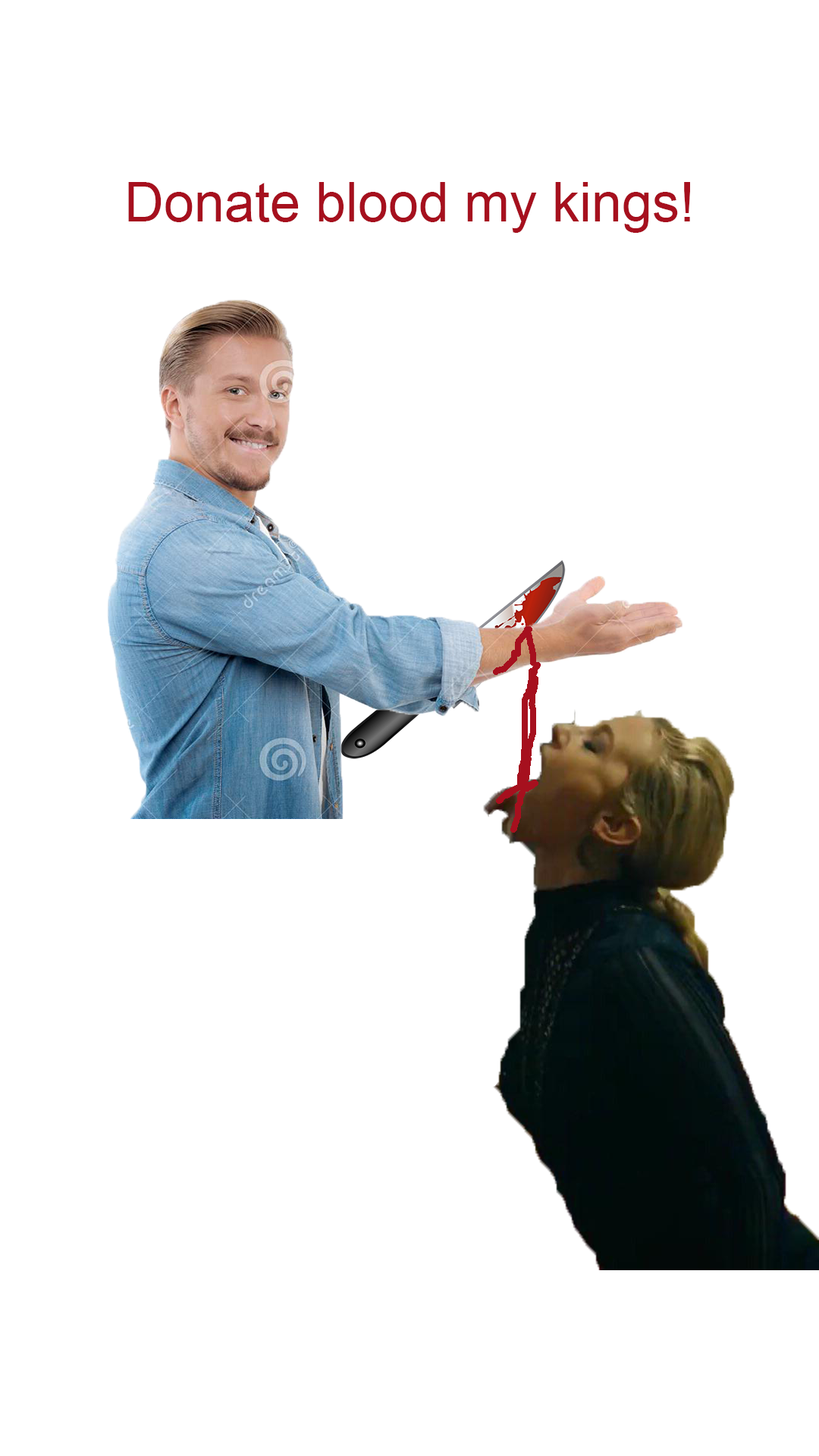
<style>
.page{position:relative;width:819px;height:1456px;background:#ffffff}
.page>*{position:absolute;margin:0}
.t1{font:54.6px "ArialMT";color:#a6101e}
</style>
<div class="page">
<p class="t1" style="left:128px;top:182px;width:562px;height:51px">Donate blood my kings!</p>
</div>
